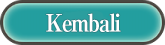
<style>
.page{position:relative;width:165px;height:45px}
.page>*{position:absolute;margin:0}
.t1{font:24px "RyuminPro-ExBold";letter-spacing:-0.08em;color:#ffffff;scale:0.9 1}
</style>
<div class="page">
<p class="t1" style="left:46px;top:13px;width:75px;height:19px">Kembali</p>
</div>
